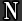
<style>
.page{position:relative;width:22px;height:21px;background:#333333}
.page>*{position:absolute;margin:0}
.t1{font:22px "RyuminPro-ExBold";letter-spacing:-0.08em;color:#ffffff;scale:0.9 1}
</style>
<div class="page">
<p class="t1" style="left:4px;top:2px;width:14px;height:17px">N</p>
</div>
